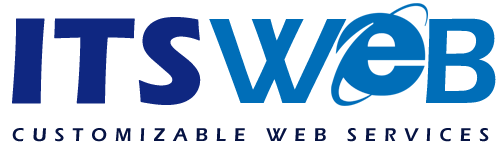
<style>
.page{position:relative;width:502px;height:153px;background:#ffffff}
.page>*{position:absolute;margin:0}
.t1{font:19px "ErasITC-Demi";letter-spacing:0.42em;color:#061343;text-transform:uppercase}
</style>
<div class="page">
<p class="t1" style="left:12px;top:128px;width:477px;height:14px">Customizable Web Services</p>
</div>
